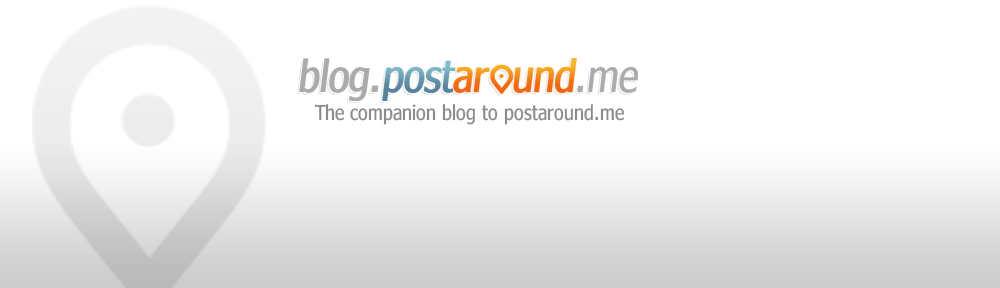
<style>
.page{position:relative;width:1000px;height:288px;background:#ffffff}
.page>*{position:absolute;margin:0}
.t1{font:44.4px "Nina";color:#ababab}
.t2{font:20.8px "Nina";color:#8c8c8c}
</style>
<div class="page">
<p class="t1" style="left:299px;top:58px;width:79px;height:43px">blog.</p>
<p class="t1" style="left:300px;top:58px;width:79px;height:43px">blog.</p>
<p class="t2" style="left:314px;top:104px;width:310px;height:21px">The companion blog to postaround.me</p>
</div>
